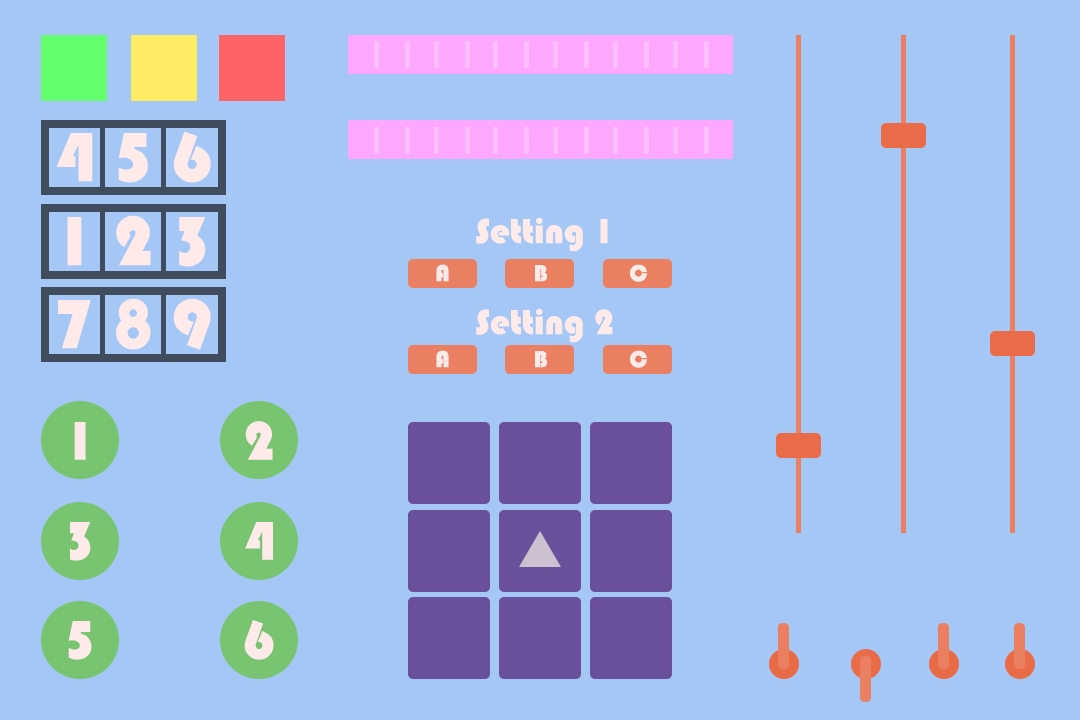
<style>
.page{position:relative;width:1080px;height:720px;background:#a5c7f6}
.page>*{position:absolute;margin:0}
.t1{font:72px "Bauhaus93";color:#ffeaea}
.t2{font:36px "Bauhaus93";color:#ffeaea}
.t3{font:24px "Bauhaus93";color:#ffeaea}
.t4{font:56px "Bauhaus93";color:#ffeaea}
</style>
<div class="page">
<p class="t1" style="left:56px;top:131px;width:155px;height:52px">4 5 6</p>
<p class="t1" style="left:67px;top:215px;width:139px;height:52px">1 2 3</p>
<p class="t2" style="left:476px;top:217px;width:132px;height:35px">Setting 1</p>
<p class="t3" style="left:436px;top:264px;width:13px;height:18px">A</p>
<p class="t3" style="left:535px;top:265px;width:12px;height:17px">B</p>
<p class="t3" style="left:630px;top:264px;width:17px;height:18px">C</p>
<p class="t1" style="left:58px;top:298px;width:153px;height:52px">7 8 9</p>
<p class="t2" style="left:476px;top:308px;width:137px;height:35px">Setting 2</p>
<p class="t3" style="left:436px;top:350px;width:13px;height:18px">A</p>
<p class="t3" style="left:535px;top:351px;width:12px;height:17px">B</p>
<p class="t3" style="left:630px;top:350px;width:17px;height:18px">C</p>
<p class="t4" style="left:74px;top:422px;width:12px;height:38px">1</p>
<p class="t4" style="left:245px;top:421px;width:28px;height:39px">2</p>
<p class="t4" style="left:70px;top:522px;width:21px;height:39px">3</p>
<p class="t4" style="left:245px;top:522px;width:28px;height:38px">4</p>
<p class="t4" style="left:68px;top:621px;width:24px;height:39px">5</p>
<p class="t4" style="left:244px;top:620px;width:30px;height:40px">6</p>
</div>
